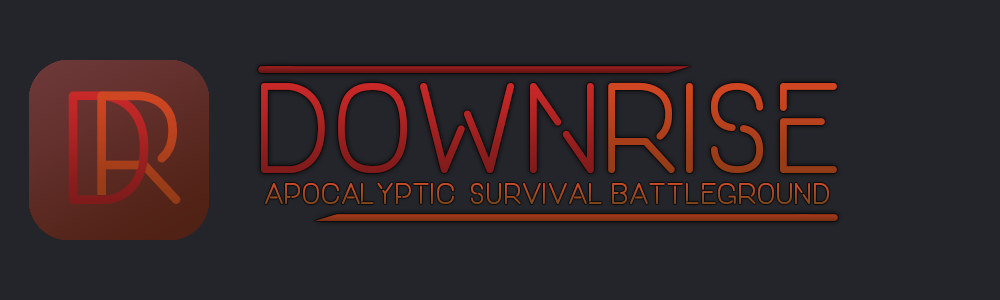
<style>
.page{position:relative;width:1000px;height:300px;background:#24252a}
.page>*{position:absolute;margin:0}
.t1{font:120px "ONEDAY";letter-spacing:0.05em}
.t2{font:28px "ONEDAY";letter-spacing:0.05em}
</style>
<div class="page">
<p class="t1" style="left:261px;top:82px;width:333px;height:92px">Down</p>
<p class="t1" style="left:608px;top:82px;width:229px;height:91px">Rise</p>
<p class="t2" style="left:265px;top:182px;width:564px;height:22px">apocalyptic  survival battleground</p>
</div>
